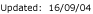
<style>
.page{position:relative;width:93px;height:14px;background:#ffffff}
.page>*{position:absolute;margin:0}
.t1{font:9px "Verdana"}
</style>
<div class="page">
<p class="t1" style="left:1px;top:4px;width:90px;height:9px">Updated:  16/09/04</p>
</div>
